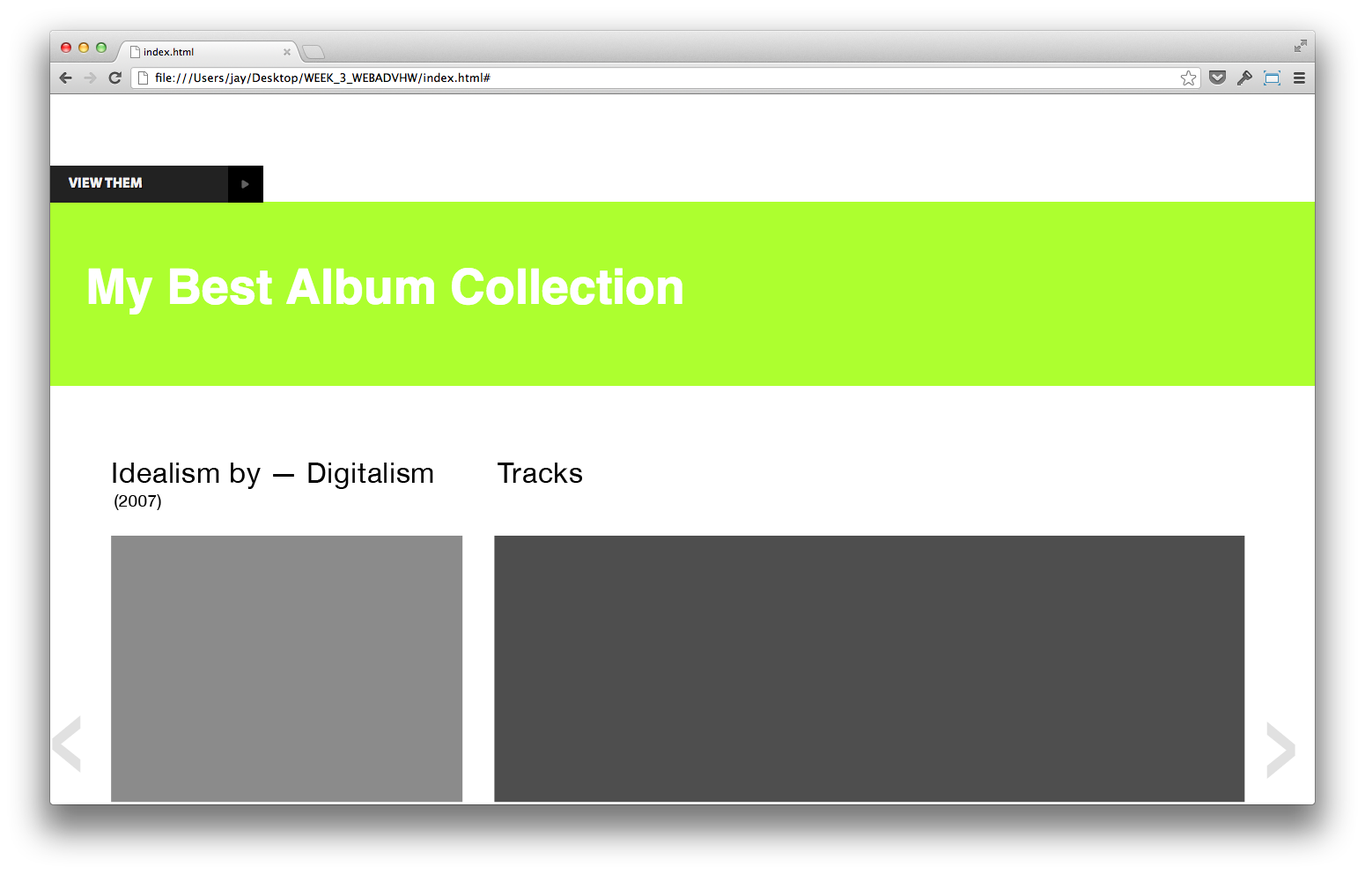
<style>
.page{position:relative;width:1365px;height:874px;background:#ffffff}
.page>*{position:absolute;margin:0}
.t1{font:28.2px "HelveticaNeue";letter-spacing:0.02em;color:#000000}
.t2{font:16.7px "HelveticaNeue";letter-spacing:0.02em;color:#000000}
.t3{font:101.3px "GillSans-Bold";letter-spacing:0.02em;color:#e1e1e1;scale:0.51 1}
</style>
<div class="page">
<p class="t1" style="left:113px;top:462px;width:320px;height:27px">Idealism by — Digitalism</p>
<p class="t1" style="left:498px;top:462px;width:84px;height:21px">Tracks</p>
<p class="t2" style="left:114px;top:494px;width:47px;height:16px">(2007)</p>
<p class="t3" style="left:52px;top:715px;width:29px;height:57px">&lt;</p>
<p class="t3" style="left:1266px;top:721px;width:29px;height:57px;rotate:180deg">&lt;</p>
</div>
